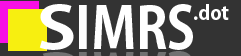
<style>
.page{position:relative;width:241px;height:56px;background:#333333}
.page>*{position:absolute;margin:0}
.t1{font:57.4px "AdobeGothicStd-Bold";color:#ffffff;scale:1.25 1}
.t2{font:57.4px "AdobeGothicStd-Bold";color:#ffffff;scale:0.9 1}
.t3{font:19.6px "AdobeGothicStd-Bold";color:#ffffff}
</style>
<div class="page">
<p class="t1" style="left:39px;top:4px;width:35px;height:46px">S</p>
<p class="t2" style="left:79px;top:4px;width:114px;height:46px">IMRS</p>
<p class="t3" style="left:194px;top:4px;width:35px;height:16px">.dot</p>
</div>
